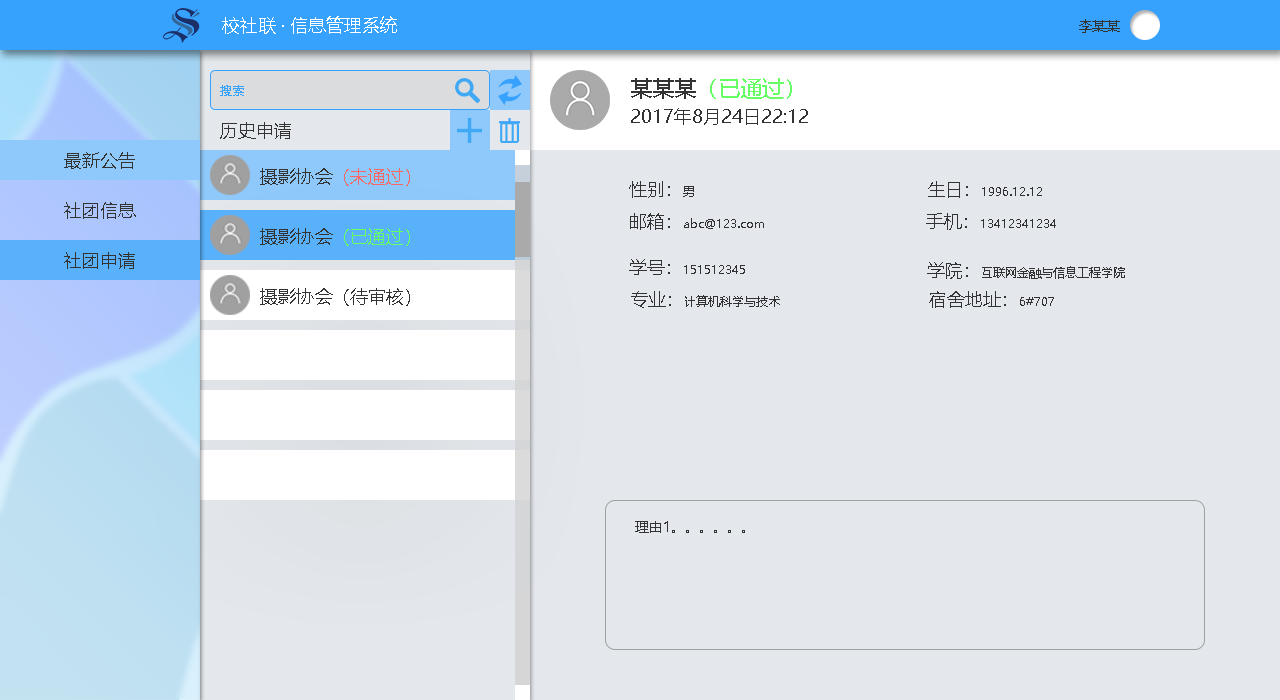
<style>
.page{position:relative;width:1280px;height:700px;background:#e4e8ec}
.page>*{position:absolute;margin:0}
.t1{font:18px "MicrosoftYaHei";color:#ffffff}
.t2{font:14px "MicrosoftYaHei";color:#333333}
.t3{font:22px "MicrosoftYaHei";color:#66ff66}
.t4{font:22px "MicrosoftYaHei";color:#333333}
.t5{font:12px "MicrosoftYaHei";color:#37a2fe}
.t6{font:18px "MicrosoftYaHei";color:#333333}
.t7{font:18px "MicrosoftYaHei";color:#ff6666}
.t8{font:12px "MicrosoftYaHei";color:#333333}
.t9{font:18px "MicrosoftYaHei";color:#66ff66}
</style>
<div class="page">
<p class="t1" style="left:222px;top:16px;width:175px;height:18px">校社联 · 信息管理系统</p>
<p class="t2" style="left:1079px;top:19px;width:41px;height:14px">李某某</p>
<p class="t3" style="left:631px;top:78px;width:161px;height:21px"><span class="t4">某某某</span>（已通过）</p>
<p class="t5" style="left:220px;top:85px;width:24px;height:11px">搜索</p>
<p class="t6" style="left:631px;top:108px;width:177px;height:17px">2017年8月24日22:12</p>
<p class="t6" style="left:220px;top:122px;width:71px;height:17px">历史申请</p>
<p class="t6" style="left:64px;top:152px;width:71px;height:17px">最新公告</p>
<p class="t7" style="left:260px;top:168px;width:150px;height:18px"><span class="t6">摄影协会</span>（未通过）</p>
<p class="t6" style="left:629px;top:181px;width:65px;height:17px">性别：<span class="t8">男</span></p>
<p class="t8" style="left:928px;top:181px;width:114px;height:17px"><span class="t6">生日：</span>1996.12.12</p>
<p class="t6" style="left:64px;top:202px;width:72px;height:17px">社团信息</p>
<p class="t8" style="left:630px;top:213px;width:134px;height:17px"><span class="t6">邮箱：</span>abc@123.com</p>
<p class="t8" style="left:926px;top:213px;width:130px;height:17px"><span class="t6">手机：</span>13412341234</p>
<p class="t9" style="left:260px;top:228px;width:150px;height:18px"><span class="t6">摄影协会</span>（已通过）</p>
<p class="t6" style="left:64px;top:252px;width:71px;height:17px">社团申请</p>
<p class="t8" style="left:629px;top:259px;width:116px;height:16px"><span class="t6">学号：</span>151512345</p>
<p class="t8" style="left:927px;top:262px;width:198px;height:17px"><span class="t6">学院：</span>互联网金融与信息工程学院</p>
<p class="t6" style="left:260px;top:288px;width:150px;height:18px">摄影协会（待审核）</p>
<p class="t8" style="left:631px;top:291px;width:149px;height:17px"><span class="t6">专业：</span>计算机科学与技术</p>
<p class="t6" style="left:929px;top:291px;width:125px;height:17px">宿舍地址：<span class="t8">6#707</span></p>
<p class="t2" style="left:635px;top:521px;width:110px;height:12px">理由1。。。。。。</p>
</div>
